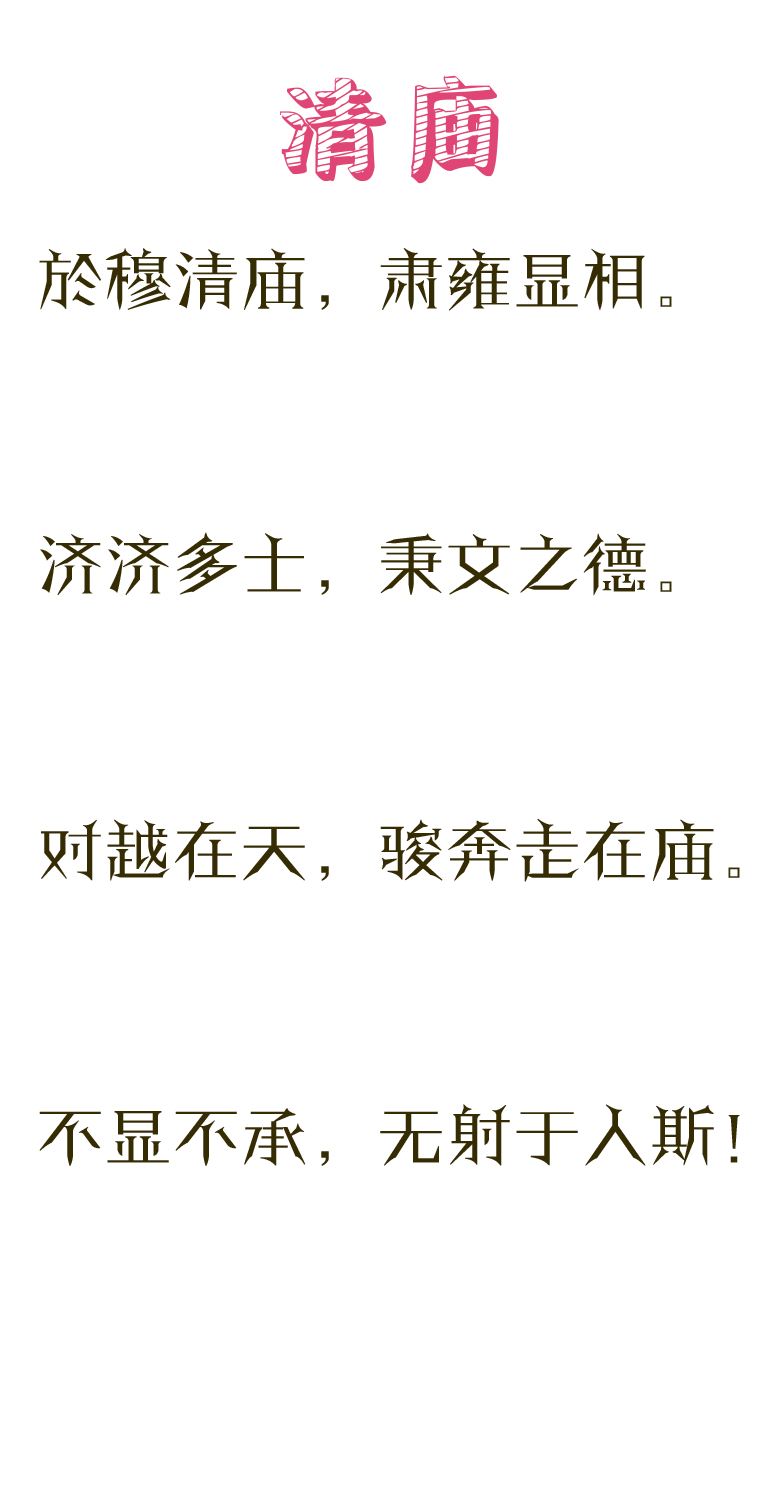
<style>
.page{position:relative;width:768px;height:1512px;background:#ffffff}
.page>*{position:absolute;margin:0}
.t1{font:124px "SentyCHALK";color:#e04675}
.t2{font:68.2px/285.4px "FZJTJW--GB1-0";color:#362c04}
</style>
<div class="page">
<p class="t1" style="left:280px;top:75px;width:219px;height:109px">清庙</p>
<p class="t2" style="left:39px;top:248px;width:701px;height:918px">於穆清庙，肃雍显相。<br>济济多士，秉文之德。<br>对越在天，骏奔走在庙。<br>不显不承，无射于人斯！</p>
</div>
